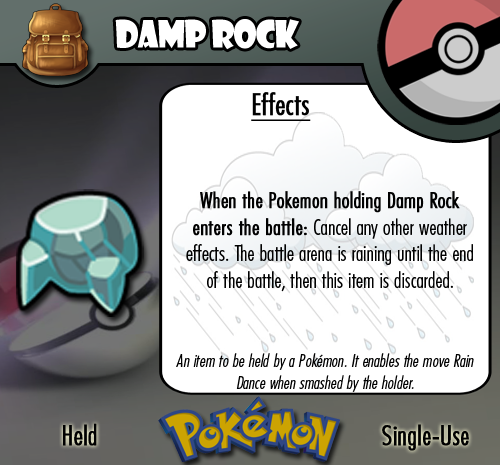
<style>
.page{position:relative;width:500px;height:465px;background:#ffffff}
.page>*{position:absolute;margin:0}
.t1{font:36.7px "ShowcardGothic-Reg";letter-spacing:-0.025em;color:#ffffff;scale:0.91 1}
.t2{font:22.2px "FuturaCondensedBQ-Light";color:#010101}
.t3{font:27.8px "FuturaCondensedBQ-Light";color:#010101;font-weight:bold}
.t4{font:30.6px "FuturaCondensedBQ-Light";color:#010101;font-weight:bold;text-decoration:underline}
.t5{font:22.2px "FuturaCondensedBQ-Light";color:#010101;font-weight:bold}
.t6{font:18.1px "FuturaCondensedBQ-Light";color:#010101;font-style:italic}
</style>
<div class="page">
<p class="t1" style="left:115px;top:19px;width:184px;height:31px">Damp Rock</p>
<p class="t2" style="left:186px;top:92px;width:287px;height:200px"><span class="t3">  </span><span class="t4">Effects<br><br><br></span><span class="t5">When the Pokemon holding Damp Rock enters the battle: </span>Cancel any other weather effects. The battle arena is raining until the end of the battle, then this item is discarded.</p>
<p class="t6" style="left:176px;top:353px;width:298px;height:39px;text-align:center">An item to be held by a Pokémon. It enables the move Rain Dance when smashed by the holder.</p>
<p class="t3" style="left:63px;top:423px;width:34px;height:23px">Held</p>
<p class="t3" style="left:382px;top:424px;width:87px;height:27px">Single-Use</p>
</div>
